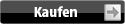
<style>
.page{position:relative;width:125px;height:24px;background:#4d4d4d}
.page>*{position:absolute;margin:0}
.t1{font:13px "KozGoPro-Heavy";color:#ffffff}
</style>
<div class="page">
<p class="t1" style="left:34px;top:6px;width:43px;height:11px">Kaufen</p>
</div>
